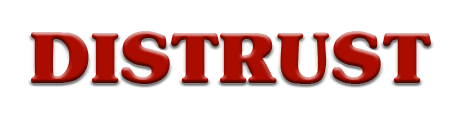
<style>
.page{position:relative;width:462px;height:114px;background:#ffffff}
.page>*{position:absolute;margin:0}
.t1{font:72px "Subway-Black";color:#aa0c00}
</style>
<div class="page">
<p class="t1" style="left:31px;top:31px;width:400px;height:53px">DISTRUST</p>
</div>
